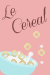
<style>
.page{position:relative;width:50px;height:75px;background:#efafaf}
.page>*{position:absolute;margin:0}
.t1{font:14px "ConeriaScriptDemo";color:#794646}
</style>
<div class="page">
<p class="t1" style="left:2px;top:5px;width:45px;height:29px;rotate:-19deg">Le<br> Cereal</p>
</div>
